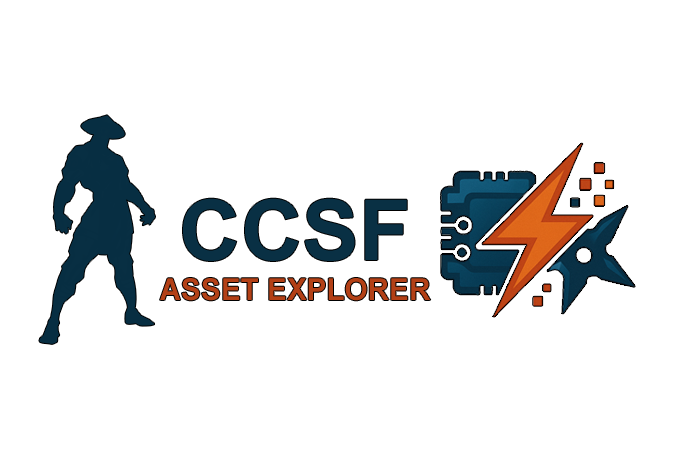
<style>
.page{position:relative;width:694px;height:458px;background:#ffffff}
.page>*{position:absolute;margin:0}
.t1{font:30.2px "Arial-BoldMT";color:#b34016}
.t2{font:84.3px "Arial-BoldMT";color:#093044}
</style>
<div class="page">
<p class="t1" style="left:160px;top:198px;width:271px;height:103px;text-align:center"><span class="t2">CCSF<br></span>ASSET EXPLORER</p>
</div>
